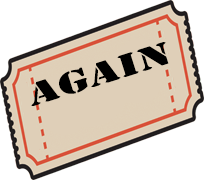
<style>
.page{position:relative;width:205px;height:180px;background:#ffffff}
.page>*{position:absolute;margin:0}
.t1{font:29.2px "StencilStd";letter-spacing:0.025em;color:#000000;scale:1.5 1}
</style>
<div class="page">
<p class="t1" style="left:31px;top:42px;width:138px;height:64px;rotate:-18deg">again</p>
</div>
